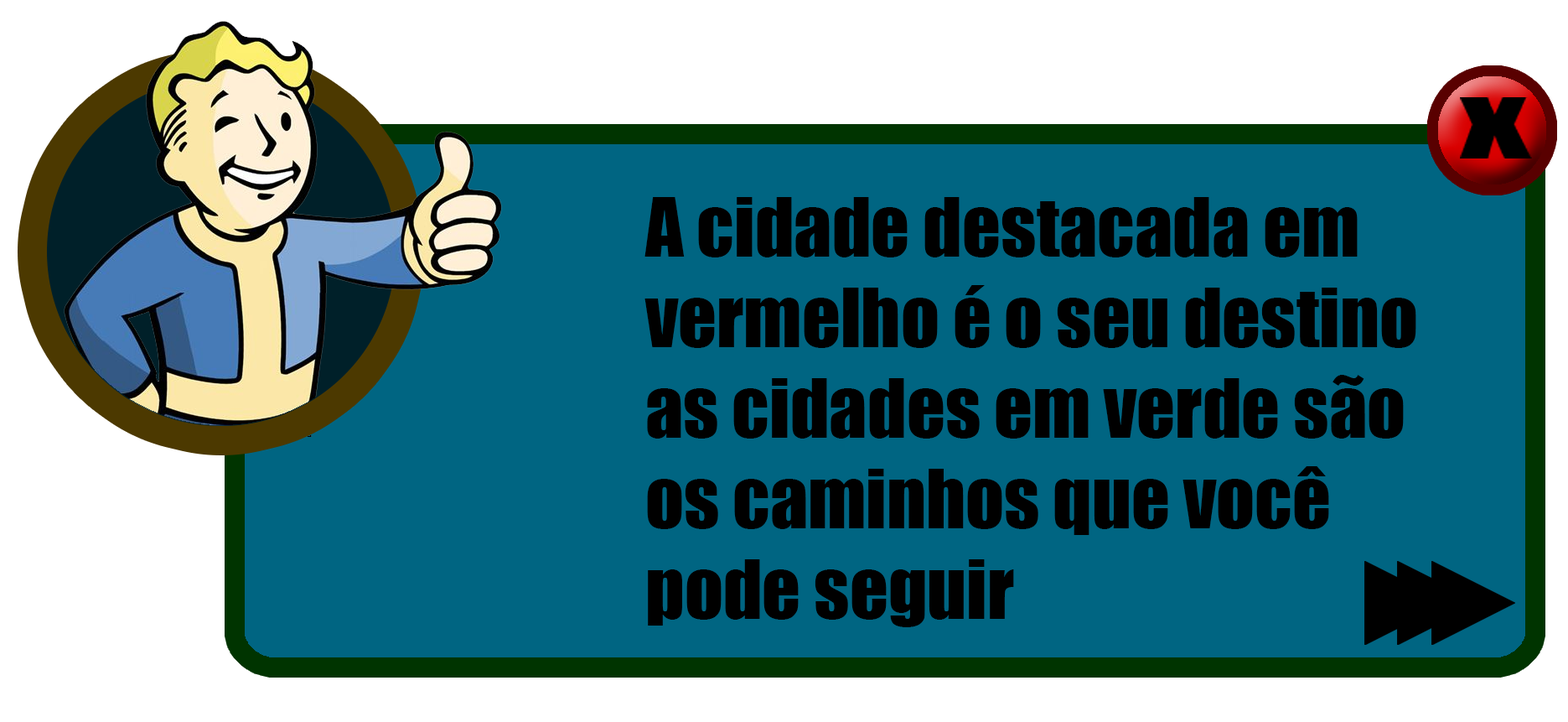
<style>
.page{position:relative;width:1568px;height:722px;background:#006582}
.page>*{position:absolute;margin:0}
.t1{font:75.4px "Impact";color:#000000}
</style>
<div class="page">
<p class="t1" style="left:644px;top:197px;width:772px;height:430px">A cidade destacada em<br>vermelho é o seu destino<br>as cidades em verde são<br>os caminhos que você<br>pode seguir</p>
</div>
